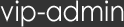
<style>
.page{position:relative;width:124px;height:27px;background:#333333}
.page>*{position:absolute;margin:0}
.t1{font:28px "STXihei";color:#ffffff;scale:0.91 1}
</style>
<div class="page">
<p class="t1" style="left:0px;top:0px;width:124px;height:27px">vip-admin</p>
</div>
